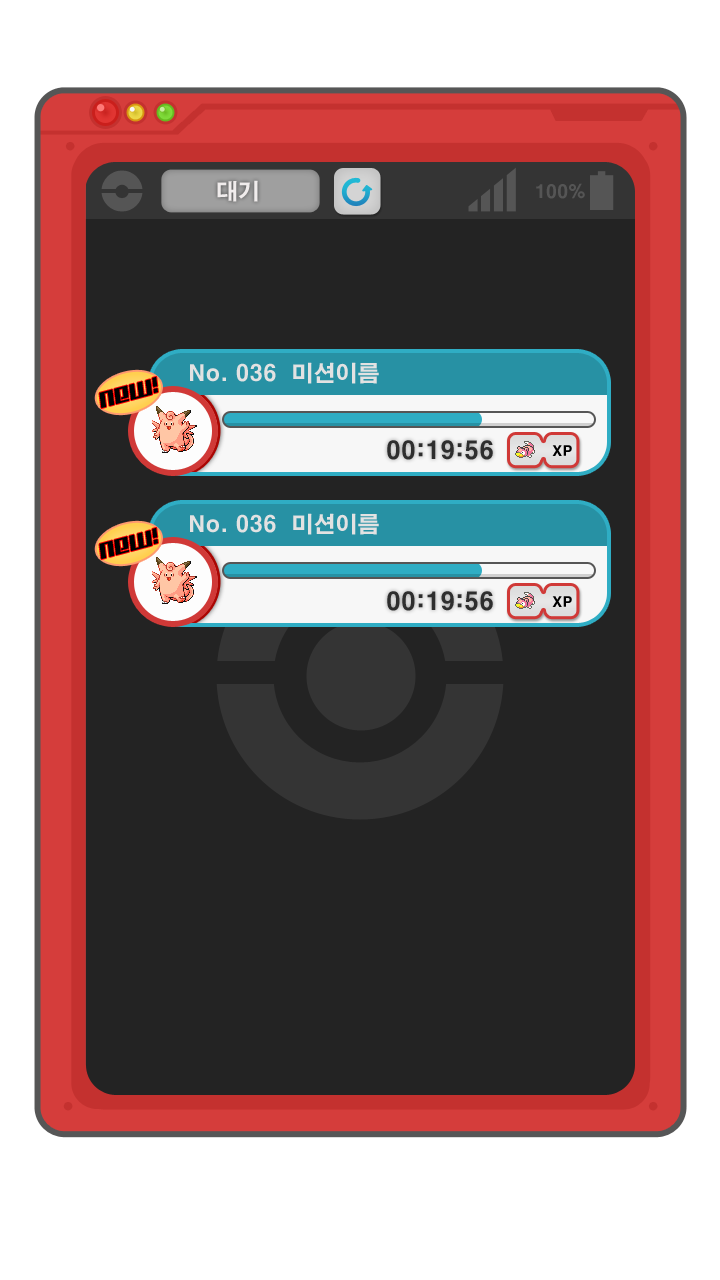
<style>
.page{position:relative;width:720px;height:1280px;background:#232323}
.page>*{position:absolute;margin:0}
.t1{font:22px "H2gtrE";color:#f0ecec}
.t2{font:18px "H2gtrE";color:#555555}
.t3{font:22px "H2gtrE";color:#e2e2e2}
.t4{font:22px "Kitchenpolice";color:#000000}
.t5{font:24px "H2gtrE";color:#2e2e2e}
.t6{font:14px "H2gtrE";color:#000000}
</style>
<div class="page">
<p class="t1" style="left:217px;top:180px;width:41px;height:22px">대기</p>
<p class="t2" style="left:536px;top:183px;width:49px;height:16px">100%</p>
<p class="t3" style="left:190px;top:362px;width:189px;height:22px">No. 036  미션이름</p>
<p class="t4" style="left:99px;top:376px;width:59px;height:33px;rotate:-15deg">NEW!</p>
<p class="t5" style="left:387px;top:440px;width:106px;height:20px">00:19:56</p>
<p class="t6" style="left:552px;top:445px;width:20px;height:11px">XP</p>
</div>
